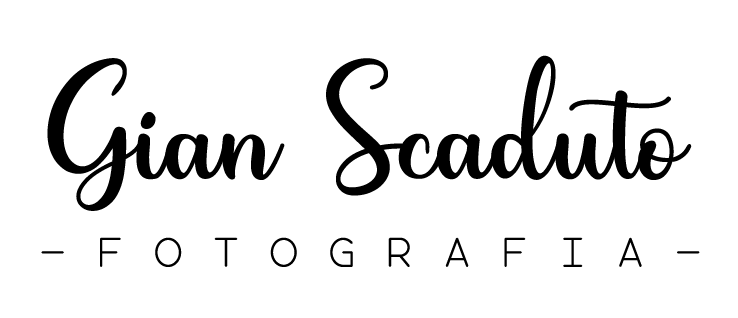
<style>
.page{position:relative;width:738px;height:318px;background:#ffffff}
.page>*{position:absolute;margin:0}
.t1{font:152.2px "Hey-Lover";color:#000000}
.t2{font:46.6px "LaviniaRegular";color:#000000}
</style>
<div class="page">
<p class="t1" style="left:47px;top:55px;width:645px;height:156px">Gian Scaduto</p>
<p class="t2" style="left:41px;top:237px;width:659px;height:30px">- F O T O G R A F I A -</p>
</div>
